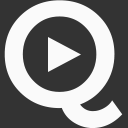
<style>
.page{position:relative;width:128px;height:128px;background:#333333}
.page>*{position:absolute;margin:0}
.t1{font:149.3px "Montserrat-Regular";color:#fafafa}
</style>
<div class="page">
<p class="t1" style="left:4px;top:0px;width:119px;height:129px">Q</p>
</div>
